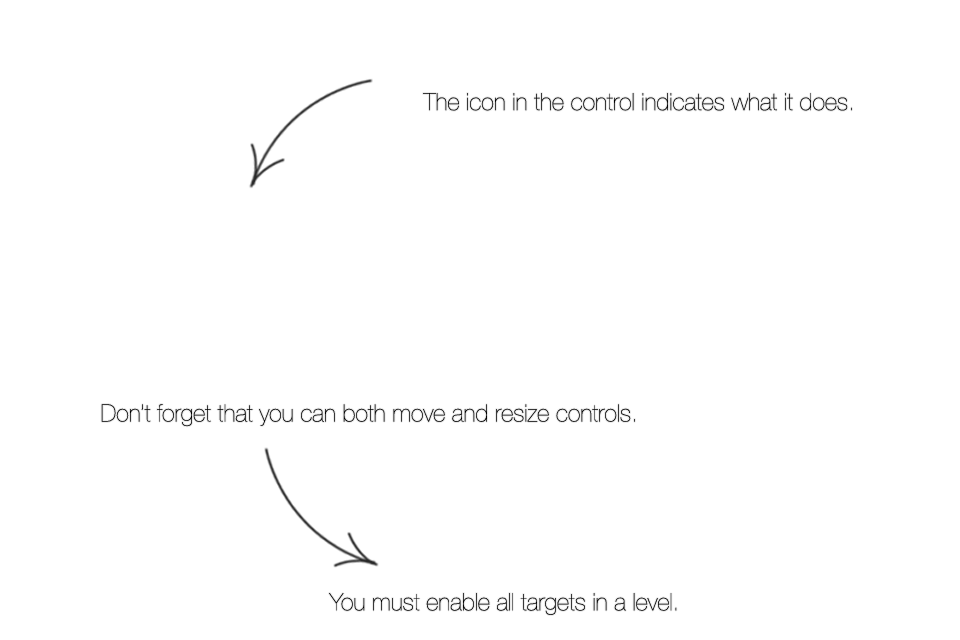
<style>
.page{position:relative;width:960px;height:640px;background:#ffffff}
.page>*{position:absolute;margin:0}
.t1{font:24px "HelveticaNeue-UltraLight";color:#000000}
</style>
<div class="page">
<p class="t1" style="left:423px;top:93px;width:429px;height:18px">The icon in the control indicates what it does.</p>
<p class="t1" style="left:101px;top:404px;width:534px;height:23px">Don’t forget that you can both move and resize controls.</p>
<p class="t1" style="left:329px;top:593px;width:348px;height:22px">You must enable all targets in a level.</p>
</div>
